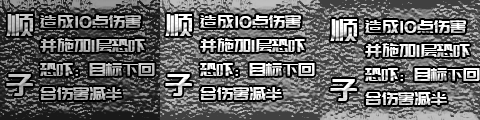
<style>
.page{position:relative;width:480px;height:120px}
.page>*{position:absolute;margin:0}
.t1{font:30px/60px "PangMenZhengDao";letter-spacing:-0.01em;color:#bdbdbd}
.t2{font:18px/24px "PangMenZhengDao";letter-spacing:-0.01em}
.t3{font:30px/60px "PangMenZhengDao";letter-spacing:-0.01em;color:#ffffff}
.t4{font:18px/24px "PangMenZhengDao";letter-spacing:-0.01em;color:#ffffff}
</style>
<div class="page">
<p class="t1" style="left:6px;top:14px;width:27px;height:82px">顺<br>子</p>
<p class="t2" style="left:40px;top:15px;width:115px;height:85px">造成10点伤害<br>并施加1层恐吓<br>恐吓：目标下回合伤害减半</p>
<p class="t3" style="left:165px;top:14px;width:27px;height:82px">顺<br>子</p>
<p class="t4" style="left:200px;top:15px;width:115px;height:85px">造成10点伤害<br>并施加1层恐吓<br>恐吓：目标下回合伤害减半</p>
<p class="t3" style="left:330px;top:19px;width:27px;height:82px">顺<br>子</p>
<p class="t4" style="left:365px;top:20px;width:115px;height:85px">造成10点伤害<br>并施加1层恐吓<br>恐吓：目标下回合伤害减半</p>
</div>
